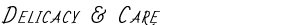
<style>
.page{position:relative;width:300px;height:25px;background:#ffffff}
.page>*{position:absolute;margin:0}
.t1{font:17px "BadScript-Regular";letter-spacing:0.2em;color:#000000;font-variant:small-caps;font-weight:bold;font-style:italic}
</style>
<div class="page">
<p class="t1" style="left:1px;top:6px;width:159px;height:21px">Delicacy &amp; Care</p>
</div>
